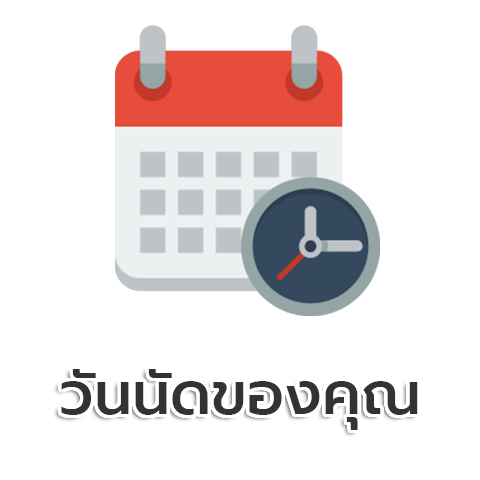
<style>
.page{position:relative;width:480px;height:480px;background:#ffffff}
.page>*{position:absolute;margin:0}
.t1{font:60px "Prompt-Medium";color:#333333}
</style>
<div class="page">
<p class="t1" style="left:61px;top:369px;width:357px;height:61px">วันนัดของคุณ</p>
</div>
